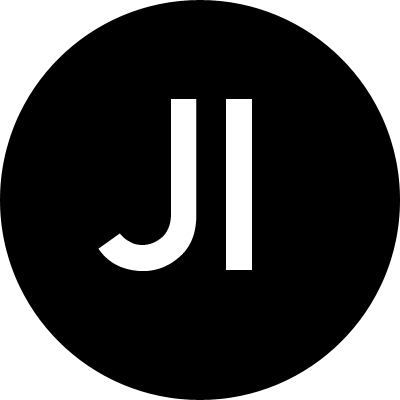
<style>
.page{position:relative;width:400px;height:400px;background:#000000}
.page>*{position:absolute;margin:0}
.t1{font:240.4px "DINAlternate-Bold";color:#ffffff}
</style>
<div class="page">
<p class="t1" style="left:98px;top:99px;width:154px;height:172px">JI</p>
</div>
